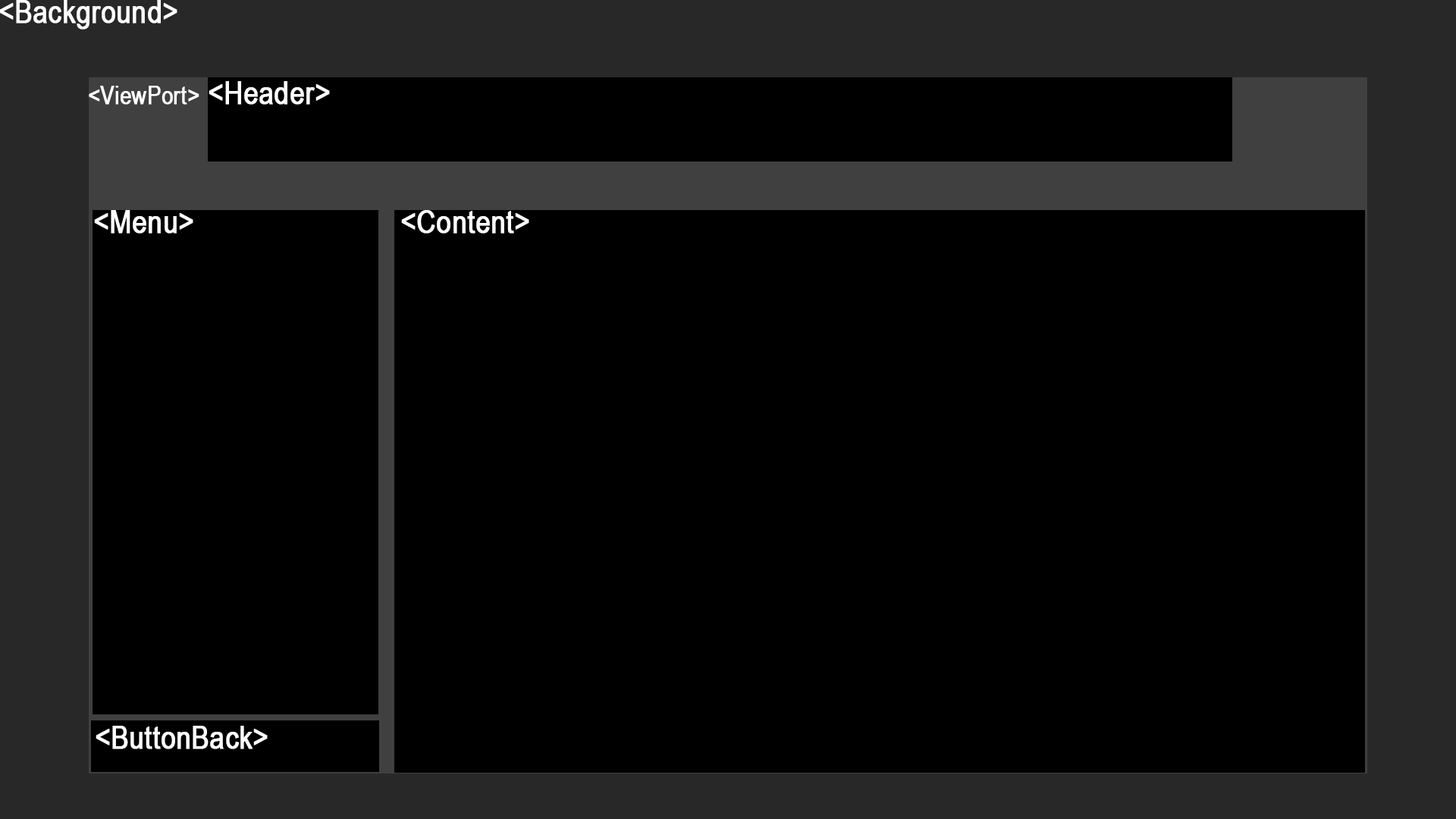
<style>
.page{position:relative;width:1456px;height:819px;background:#000000}
.page>*{position:absolute;margin:0}
.t1{font:31.9px "ArialNarrow";color:#ffffff;font-weight:bold}
.t2{font:24.9px "ArialNarrow";color:#ffffff;font-weight:bold}
</style>
<div class="page">
<p class="t1" style="left:0px;top:0px;width:177px;height:30px">&lt;Background&gt;</p>
<p class="t2" style="left:89px;top:86px;width:110px;height:19px">&lt;ViewPort&gt;</p>
<p class="t1" style="left:209px;top:81px;width:121px;height:24px">&lt;Header&gt;</p>
<p class="t1" style="left:94px;top:210px;width:99px;height:24px">&lt;Menu&gt;</p>
<p class="t1" style="left:401px;top:210px;width:128px;height:24px">&lt;Content&gt;</p>
<p class="t1" style="left:96px;top:726px;width:172px;height:23px">&lt;ButtonBack&gt;</p>
</div>
